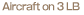
<style>
.page{position:relative;width:84px;height:15px;background:#ffffff}
.page>*{position:absolute;margin:0}
.t1{font:10px "GothicMB101Pro-DeBold";letter-spacing:-0.08em;color:#8b6e51}
</style>
<div class="page">
<p class="t1" style="left:2px;top:2px;width:78px;height:9px;opacity:0.9">Aircraft on 3 LB</p>
</div>
